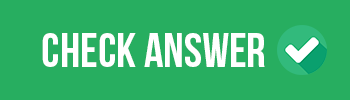
<style>
.page{position:relative;width:350px;height:100px;background:#27ae60}
.page>*{position:absolute;margin:0}
.t1{font:48px "BebasNeue";color:#ffffff}
</style>
<div class="page">
<p class="t1" style="left:42px;top:33px;width:223px;height:34px">CHECK ANSWER</p>
</div>
